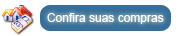
<style>
.page{position:relative;width:182px;height:36px;background:#ffffff}
.page>*{position:absolute;margin:0}
.t1{font:12px "ArialMT";color:#fefefc}
</style>
<div class="page">
<p class="t1" style="left:47px;top:13px;width:117px;height:11px">Confira suas compras</p>
</div>
